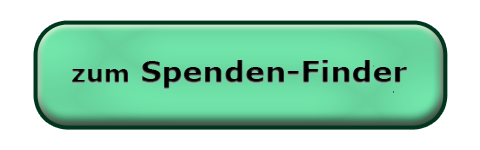
<style>
.page{position:relative;width:480px;height:150px;background:#ffffff}
.page>*{position:absolute;margin:0}
.t1{font:30px "Verdana-Bold";color:#000000}
.t2{font:25px "Verdana-Bold";color:#000000}
</style>
<div class="page">
<p class="t1" style="left:72px;top:60px;width:335px;height:29px"><span class="t2">zum</span> Spenden-Finder</p>
</div>
